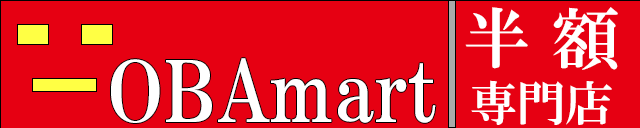
<style>
.page{position:relative;width:640px;height:128px;background:#e60012}
.page>*{position:absolute;margin:0}
.t1{font:67px/74.5px "HGSMinchoE";color:#ffffff}
.t2{font:47.9px/74.5px "HGSMinchoE";color:#ffffff}
.t3{font:84px "HGSMinchoE";color:#ffffff}
</style>
<div class="page">
<p class="t1" style="left:465px;top:7px;width:153px;height:118px;text-align:center">半 額<br><span class="t2">専門店</span></p>
<p class="t3" style="left:111px;top:58px;width:325px;height:65px">OBAmart</p>
</div>
